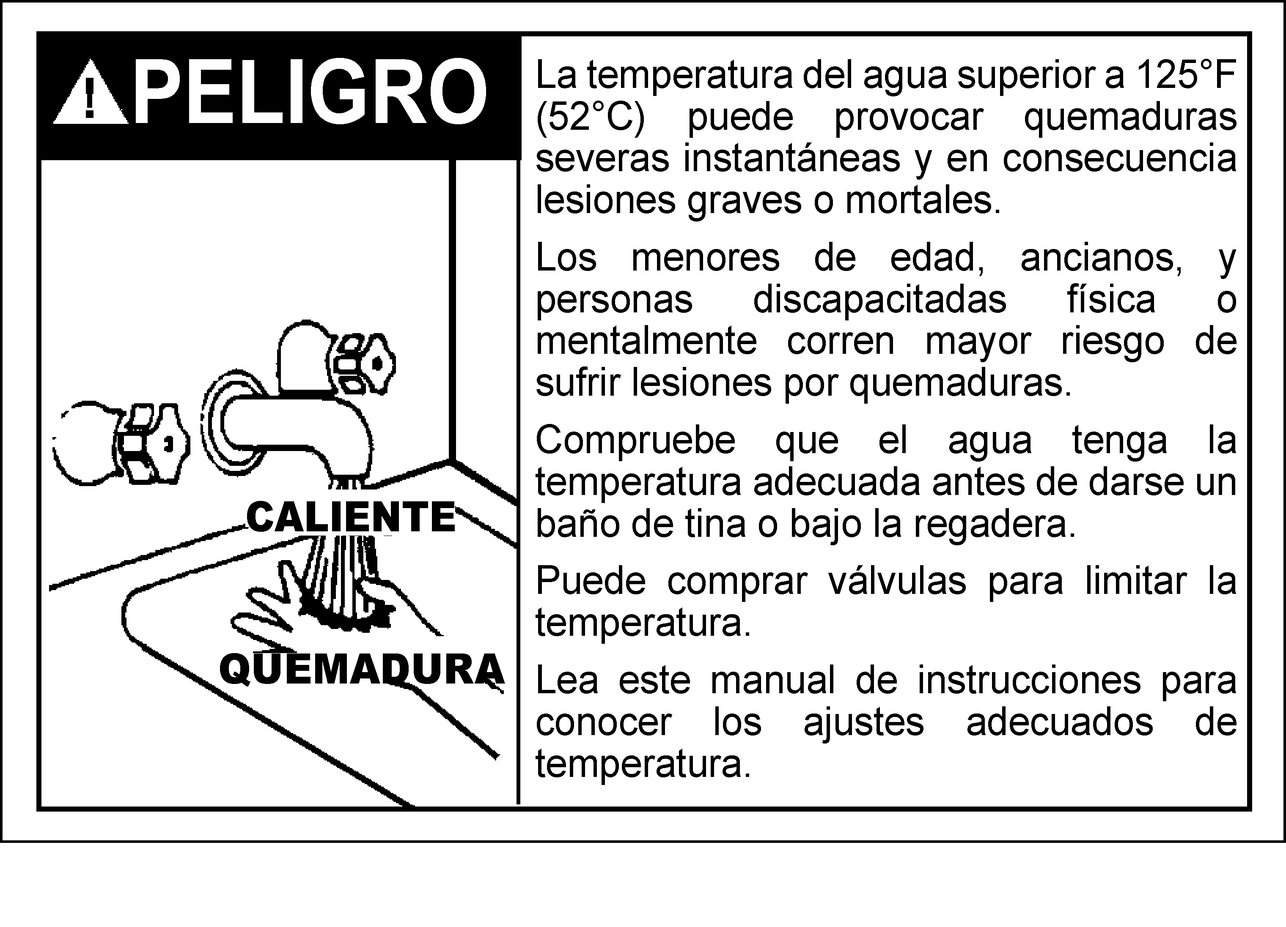
<style>
.page{position:relative;width:1286px;height:927px;background:#ffffff}
.page>*{position:absolute;margin:0}
.t1{font:88.8px "Arial-BoldMT";color:#fefefe;scale:0.9 1}
.t2{font:39.7px/41.8px "ArialMT";color:#010101;scale:0.97 1}
.t3{font:41.8px "Arial-Black";color:#000000;scale:0.9 1}
.t4{font:41.8px "Arial-Black";color:#000000;scale:0.94 1}
</style>
<div class="page">
<p class="t1" style="left:136px;top:58px;width:350px;height:66px">PELIGRO</p>
<p class="t2" style="left:535px;top:59px;width:701px;height:726px;text-align:justify">La temperatura del agua superior a 125°F (52°C) puede provocar quemaduras severas instantáneas y en consecuencia lesiones graves o mortales.<br>Los menores de edad, ancianos, y personas discapacitadas física o mentalmente corren mayor riesgo de sufrir lesiones por quemaduras.<br>Compruebe que el agua tenga la temperatura adecuada antes de darse un baño de tina o bajo la regadera.<br>Puede comprar válvulas para limitar la temperatura.<br>Lea este manual de instrucciones para conocer los ajustes adecuados de temperatura.</p>
<p class="t3" style="left:247px;top:501px;width:208px;height:31px">CALIENTE</p>
<p class="t4" style="left:220px;top:653px;width:285px;height:34px">QUEMADURA</p>
</div>
